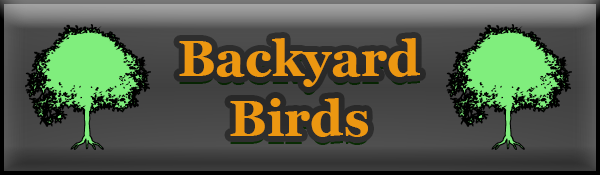
<style>
.page{position:relative;width:600px;height:175px}
.page>*{position:absolute;margin:0}
.t1{font:50px "Georgia-Bold";color:#ec9711}
</style>
<div class="page">
<p class="t1" style="left:179px;top:38px;width:241px;height:99px;text-align:center">Backyard<br>Birds</p>
</div>
